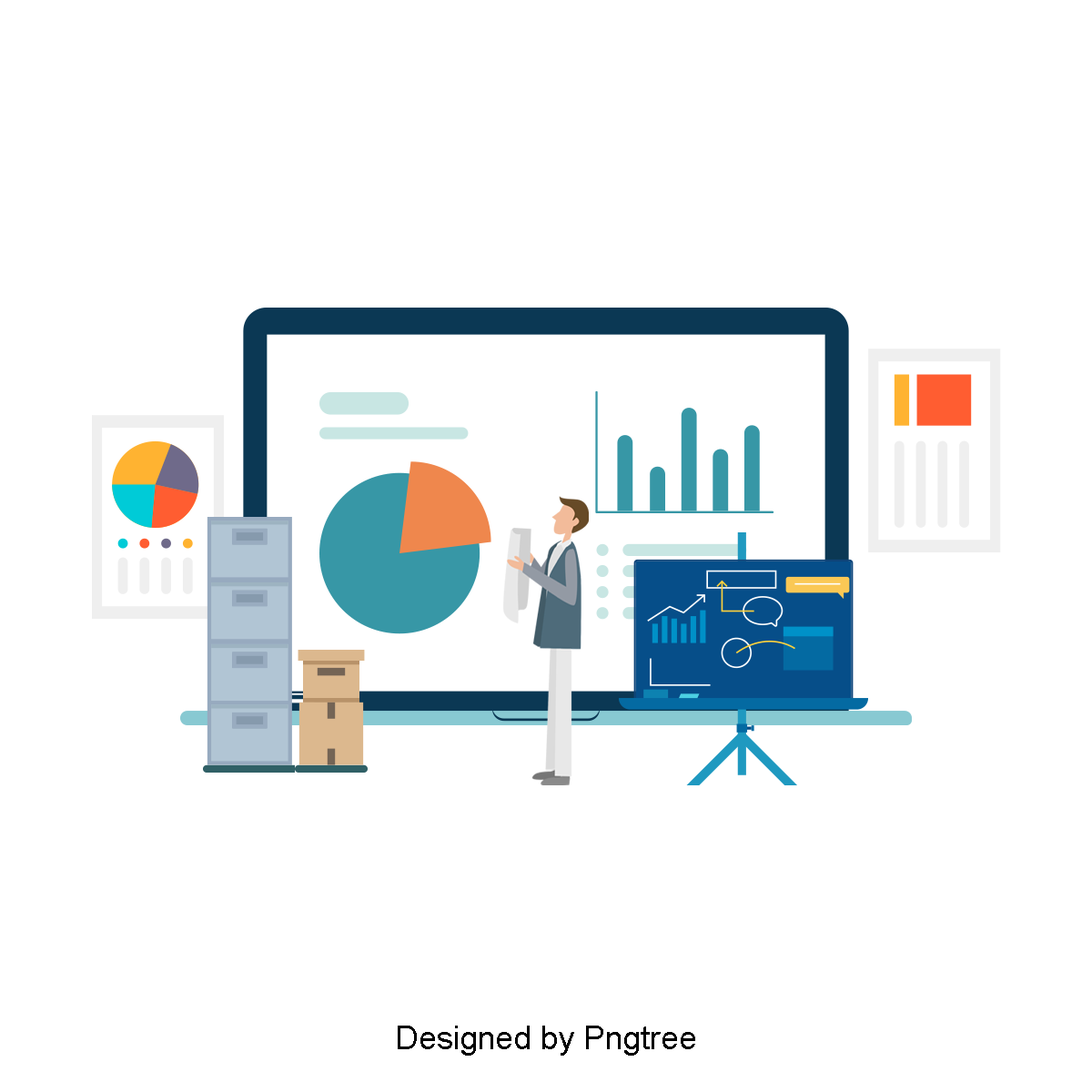
<style>
.page{position:relative;width:1092px;height:1092px;background:#ffffff}
.page>*{position:absolute;margin:0}
.t1{font:32.8px "ArialMT";color:#000000}
</style>
<div class="page">
<p class="t1" style="left:398px;top:1026px;width:297px;height:30px">Designed by Pngtree</p>
</div>
